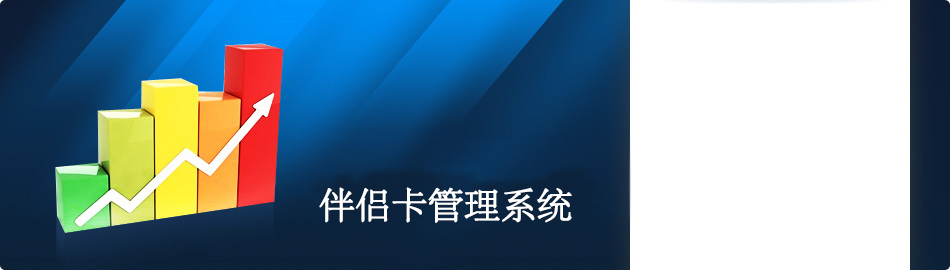
<style>
.page{position:relative;width:950px;height:270px;background:#ffffff}
.page>*{position:absolute;margin:0}
.t1{font:36px "STSong";letter-spacing:-0.02em;color:#ffffff;font-weight:bold}
</style>
<div class="page">
<p class="t1" style="left:319px;top:187px;width:253px;height:36px">伴侣卡管理系统</p>
</div>
